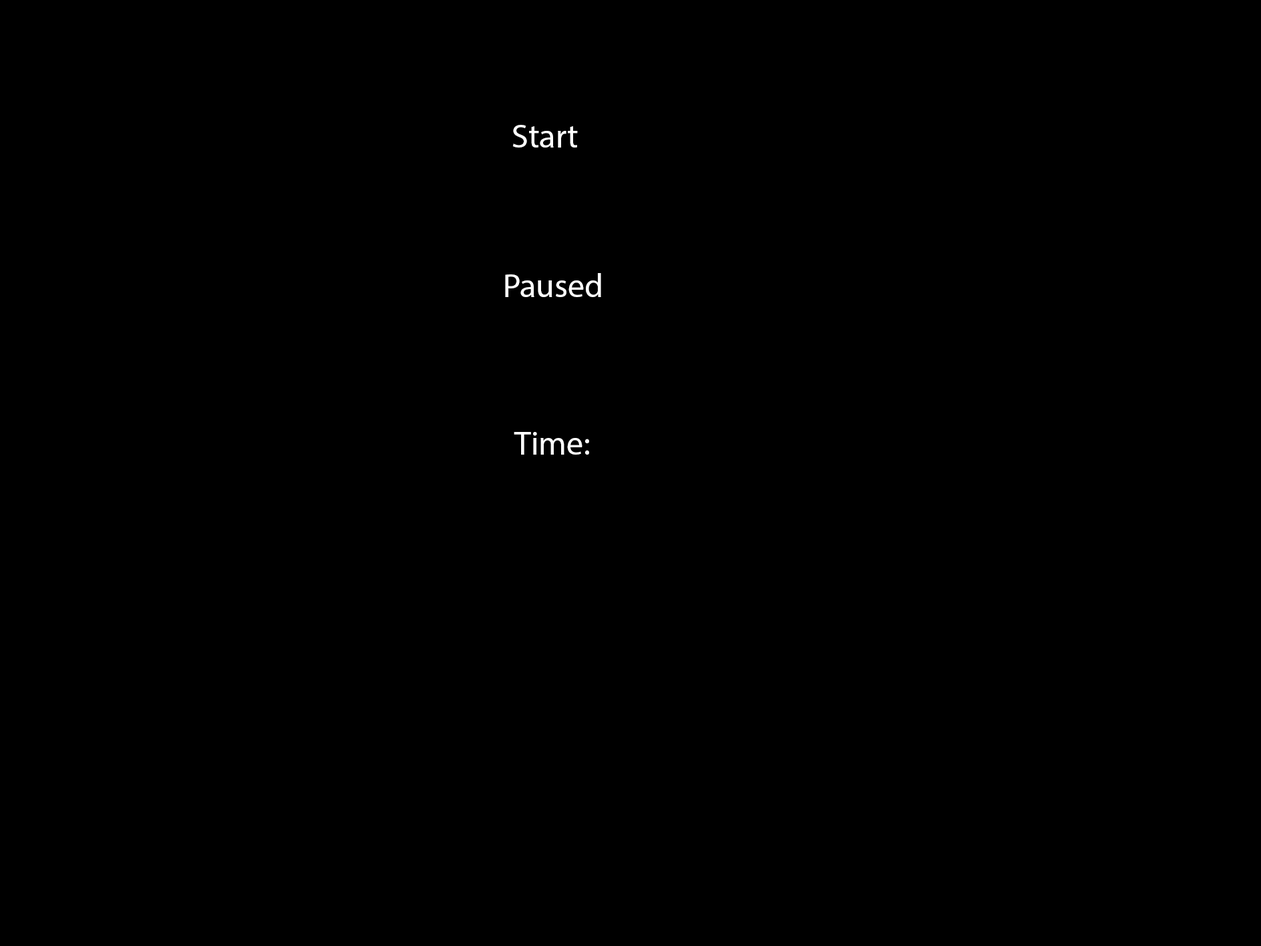
<style>
.page{position:relative;width:1261px;height:946px;background:#000000}
.page>*{position:absolute;margin:0}
.t1{font:33.4px "MyriadPro-Regular";color:#fefefe}
</style>
<div class="page">
<p class="t1" style="left:505px;top:273px;width:96px;height:24px">Paused</p>
<p class="t1" style="left:514px;top:432px;width:75px;height:22px">Time:</p>
</div>
